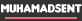
<style>
.page{position:relative;width:82px;height:21px;background:#333333}
.page>*{position:absolute;margin:0}
.t1{font:12.5px "Insaniburger";color:#ffffff}
</style>
<div class="page">
<p class="t1" style="left:1px;top:4px;width:81px;height:9px">MuhamadSent</p>
</div>
